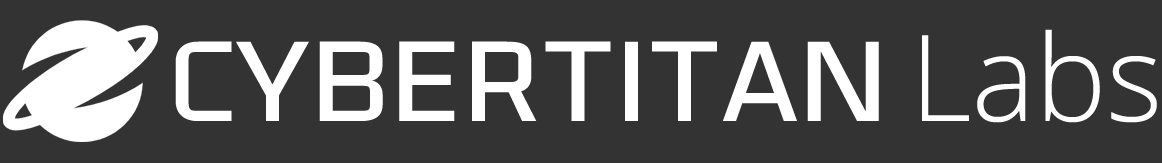
<style>
.page{position:relative;width:1162px;height:163px;background:#333333}
.page>*{position:absolute;margin:0}
.t1{font:119.9px "OpenSans-Light";color:#ffffff}
.t2{font:119.9px "Olney-Light";color:#ffffff}
</style>
<div class="page">
<p class="t1" style="left:922px;top:29px;width:235px;height:94px">Labs</p>
<p class="t2" style="left:175px;top:41px;width:704px;height:80px">CYBERTITAN</p>
</div>
